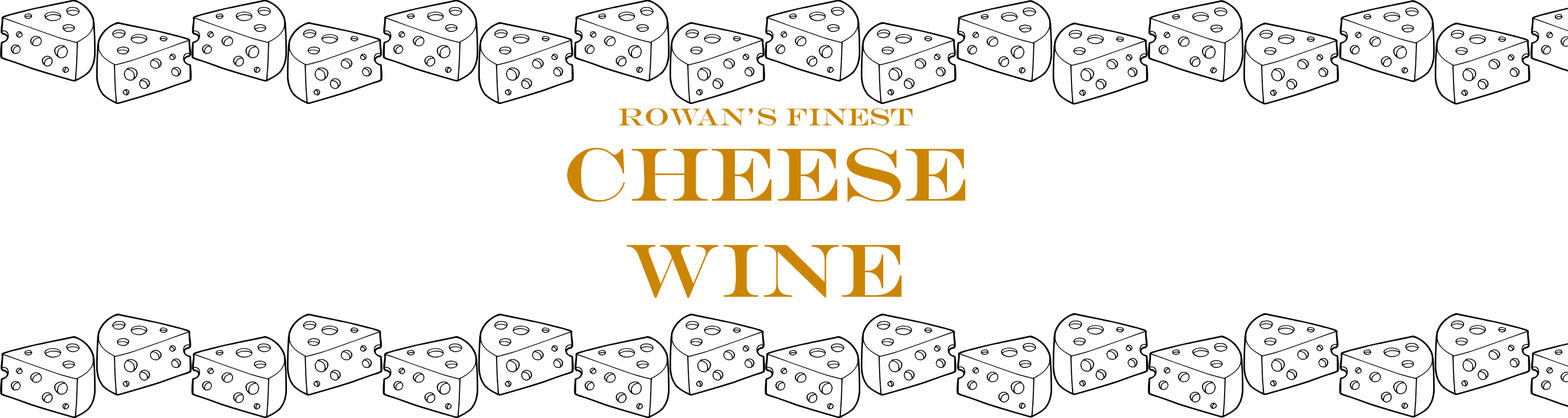
<style>
.page{position:relative;width:1568px;height:418px;background:#ffffff}
.page>*{position:absolute;margin:0}
.t1{font:25.2px "EngraversMT";color:#cc8500;scale:1.05 1}
.t2{font:75.9px "EngraversMT";color:#cc8500;scale:1.05 1}
</style>
<div class="page">
<p class="t1" style="left:618px;top:108px;width:295px;height:17px">rowan’s finest</p>
<p class="t2" style="left:567px;top:148px;width:398px;height:150px;text-align:center">Cheese<br>wine</p>
</div>
